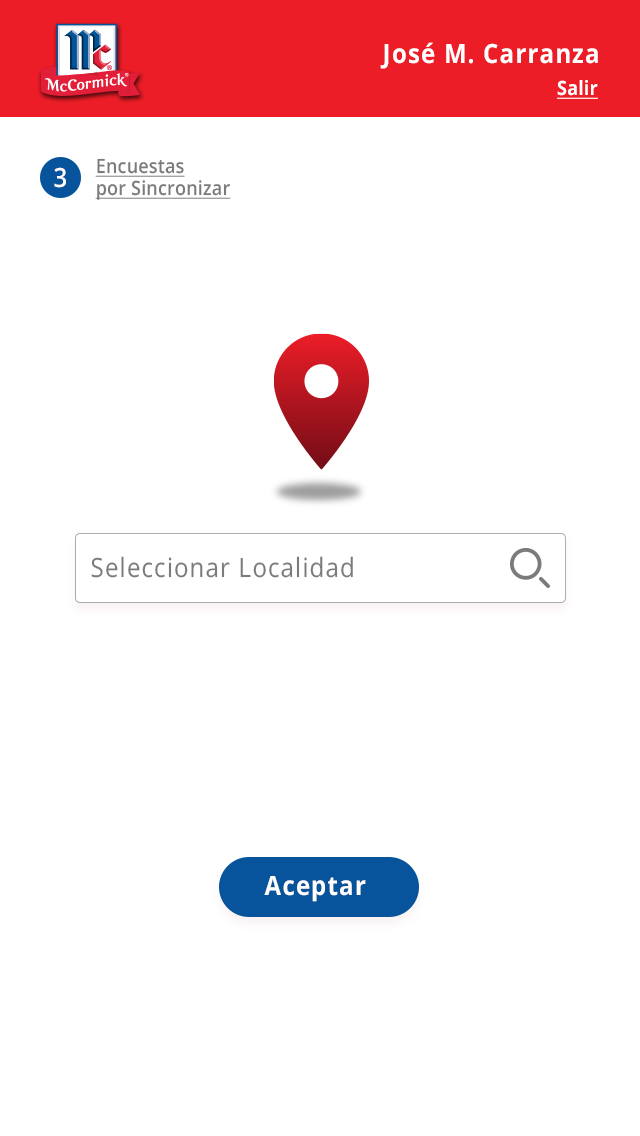
<style>
.page{position:relative;width:640px;height:1136px;background:#ffffff}
.page>*{position:absolute;margin:0}
.t1{font:26.4px "OpenSans-Bold";letter-spacing:0.05em;color:#ffffff;scale:0.91 1}
.t2{font:19.8px "OpenSans-Bold";letter-spacing:0.01em;color:#ffffff;text-decoration:underline;scale:0.91 1}
.t3{font:19.8px/22px "OpenSans-SemiBold";letter-spacing:0.01em;color:#7b7b7b;text-decoration:underline;scale:0.91 1}
.t4{font:26.4px "OpenSans-SemiBold";letter-spacing:0.05em;color:#ffffff;scale:0.91 1}
.t5{font:26.4px "OpenSans-Regular";letter-spacing:0.05em;color:#7b7b7b;scale:0.91 1}
</style>
<div class="page">
<p class="t1" style="left:380px;top:42px;width:218px;height:27px">José M. Carranza</p>
<p class="t2" style="left:557px;top:80px;width:41px;height:19px">Salir</p>
<p class="t3" style="left:95px;top:158px;width:136px;height:42px">Encuestas<br>por Sincronizar</p>
<p class="t4" style="left:54px;top:167px;width:12px;height:21px">3</p>
<p class="t5" style="left:91px;top:556px;width:262px;height:22px">Seleccionar Localidad</p>
<p class="t1" style="left:264px;top:876px;width:102px;height:26px">Aceptar</p>
</div>
